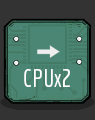
<style>
.page{position:relative;width:95px;height:120px;background:#333333}
.page>*{position:absolute;margin:0}
.t1{font:24px "Economica-Regular";color:#ffffff}
</style>
<div class="page">
<p class="t1" style="left:24px;top:69px;width:46px;height:18px">CPUx2</p>
</div>
